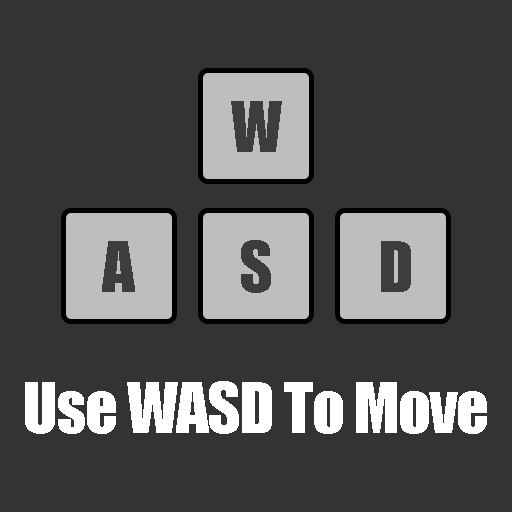
<style>
.page{position:relative;width:512px;height:512px;background:#333333}
.page>*{position:absolute;margin:0}
.t1{font:64px "Impact";letter-spacing:-0.02em;color:#3d3d3d}
.t2{font:64px "Impact";letter-spacing:-0.02em;color:#ffffff}
</style>
<div class="page">
<p class="t1" style="left:231px;top:101px;width:51px;height:51px">W</p>
<p class="t1" style="left:102px;top:241px;width:33px;height:51px">A</p>
<p class="t1" style="left:241px;top:240px;width:30px;height:53px">S</p>
<p class="t1" style="left:381px;top:241px;width:30px;height:51px">D</p>
<p class="t2" style="left:25px;top:381px;width:462px;height:53px">Use WASD To Move</p>
</div>
